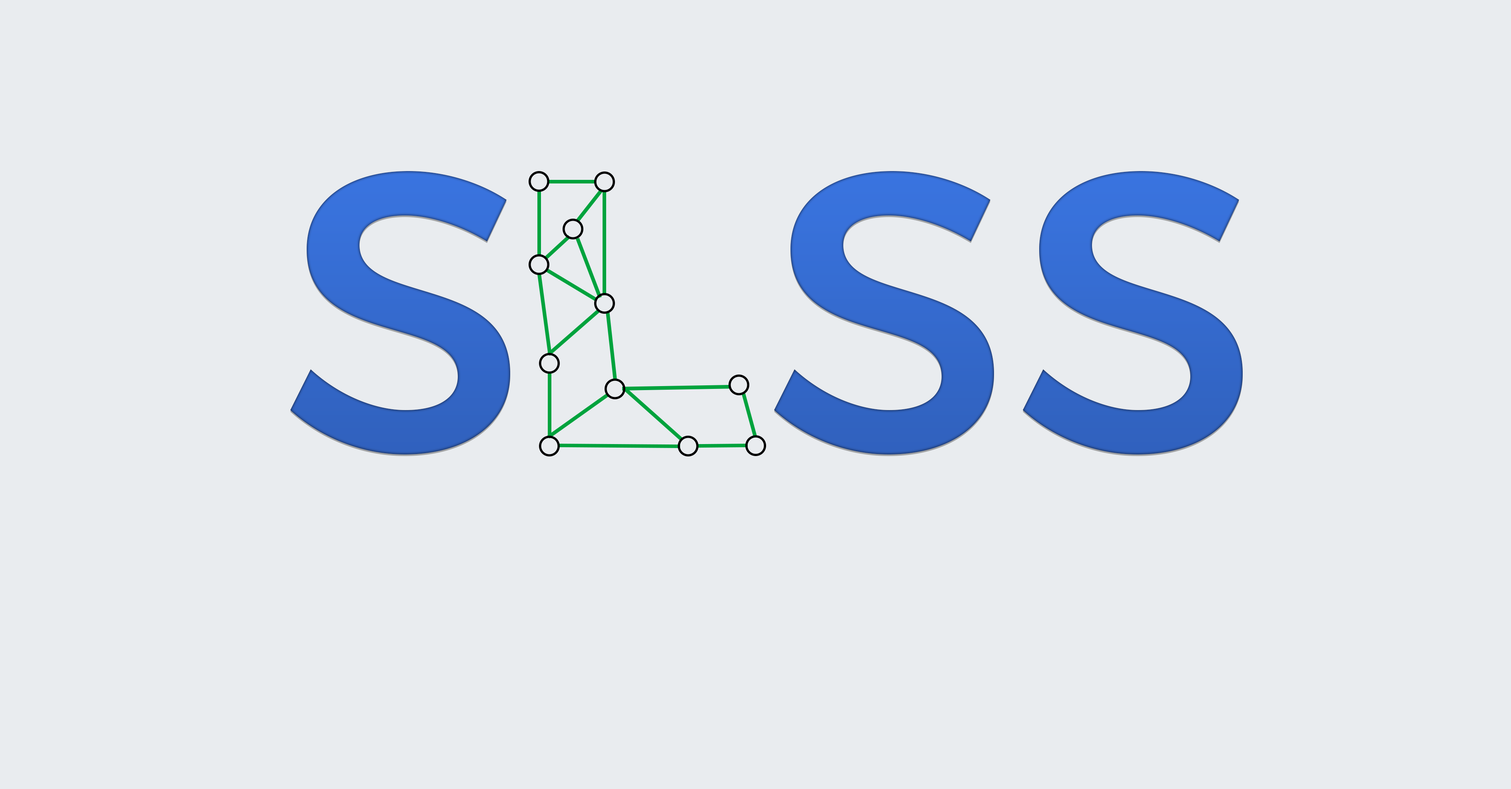
<style>
.page{position:relative;width:1511px;height:789px;background:#e9ecef}
.page>*{position:absolute;margin:0}
.t1{font:399.8px "Montserrat-Regular";color:#3469cd}
</style>
<div class="page">
<p class="t1" style="left:290px;top:171px;width:220px;height:284px">S</p>
<p class="t1" style="left:774px;top:171px;width:469px;height:284px">SS</p>
</div>
